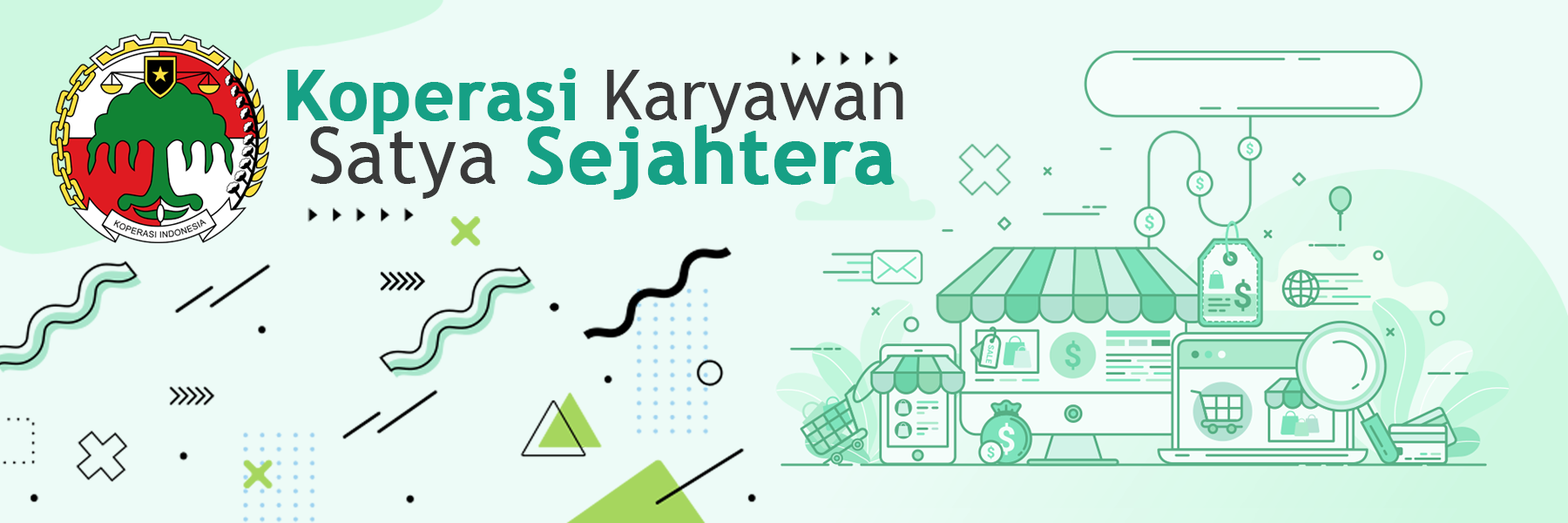
<style>
.page{position:relative;width:1568px;height:523px;background:#edfbf7}
.page>*{position:absolute;margin:0}
.t1{font:69.5px "TrebuchetMS-Bold";letter-spacing:0.01em;color:#16a085;font-weight:bold}
.t2{font:69.5px "TrebuchetMS";letter-spacing:0.01em;color:#3a3a3a}
.t3{font:77.4px "TrebuchetMS-Bold";letter-spacing:0.01em;color:#16a085;font-weight:bold}
.t4{font:77.4px "TrebuchetMS";letter-spacing:0.01em;color:#3a3a3a}
</style>
<div class="page">
<p class="t1" style="left:287px;top:68px;width:616px;height:66px">Koperasi <span class="t2">Karyawan</span></p>
<p class="t3" style="left:310px;top:125px;width:585px;height:74px"><span class="t4">Satya</span> Sejahtera</p>
</div>
